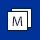
<style>
.page{position:relative;width:40px;height:40px;background:#003399}
.page>*{position:absolute;margin:0}
.t1{font:14px "MyriadPro-Regular";color:#1f2346}
</style>
<div class="page">
<p class="t1" style="left:12px;top:16px;width:11px;height:10px">M</p>
</div>
